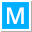
<style>
.page{position:relative;width:32px;height:32px;background:#00b0ff}
.page>*{position:absolute;margin:0}
.t1{font:23px "OpenSans-Semibold";color:#ffffff}
</style>
<div class="page">
<p class="t1" style="left:7px;top:7px;width:17px;height:17px">M</p>
</div>
